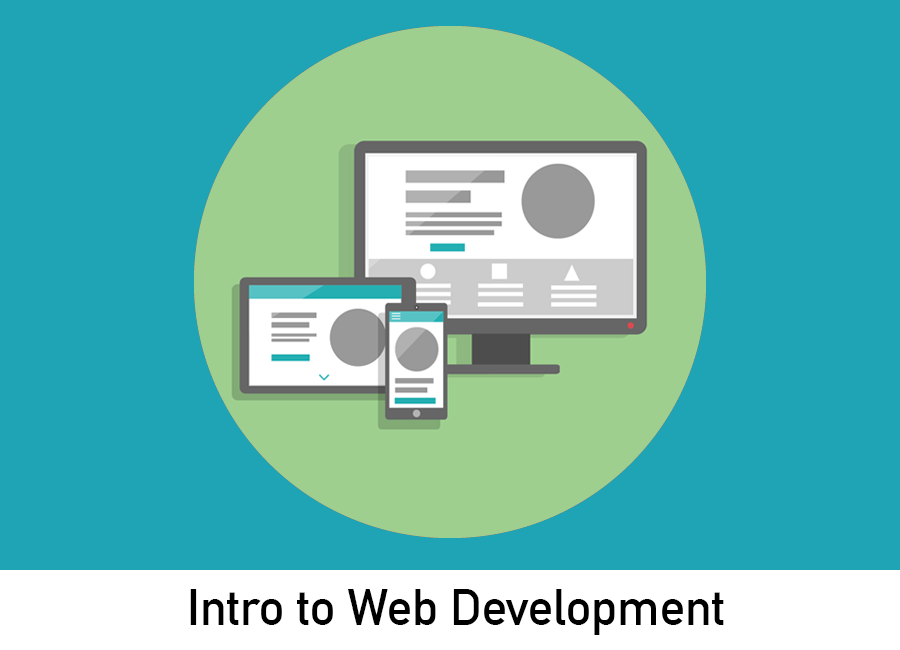
<style>
.page{position:relative;width:900px;height:650px;background:#1fa4b6}
.page>*{position:absolute;margin:0}
.t1{font:50px "DINAlternate-Bold";color:#000000}
</style>
<div class="page">
<p class="t1" style="left:190px;top:589px;width:534px;height:46px">Intro to Web Development</p>
</div>
